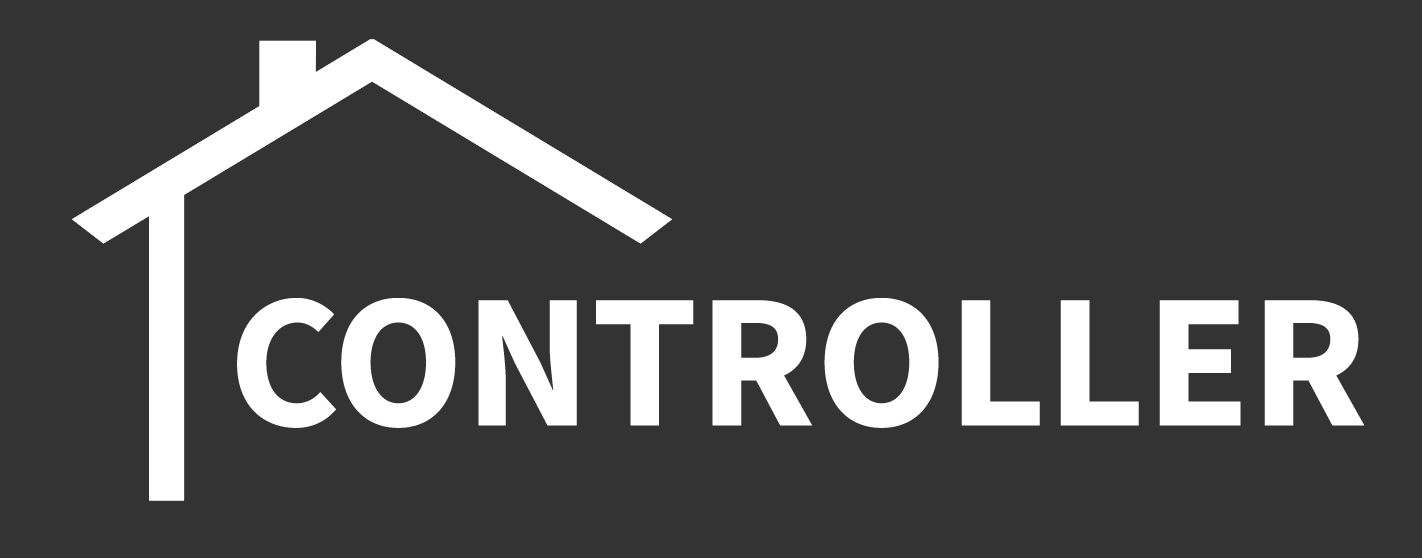
<style>
.page{position:relative;width:1422px;height:558px;background:#333333}
.page>*{position:absolute;margin:0}
.t1{font:192px "SourceSansPro-Bold";color:#ffffff}
</style>
<div class="page">
<p class="t1" style="left:237px;top:298px;width:1128px;height:130px">CONTROLLER</p>
</div>
